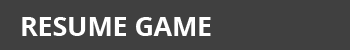
<style>
.page{position:relative;width:350px;height:50px;background:#404040}
.page>*{position:absolute;margin:0}
.t1{font:26.7px "OpenSans-Bold";color:#ffffff}
</style>
<div class="page">
<p class="t1" style="left:22px;top:17px;width:189px;height:19px">RESUME GAME</p>
</div>
